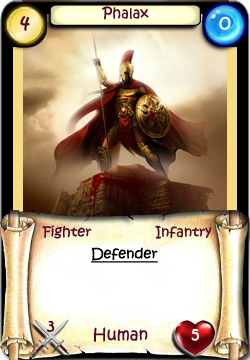
<style>
.page{position:relative;width:250px;height:360px}
.page>*{position:absolute;margin:0}
.t1{font:14px "KristenITC-Regular";color:#51092d}
.t2{font:20px "KristenITC-Regular";color:#51092d}
.t3{font:20px "KristenITC-Regular";color:#ffffff}
.t4{font:14px "KristenITC-Regular";color:#000000;text-decoration:underline}
.t5{font:16px "KristenITC-Regular";color:#51092d}
.t6{font:16px "KristenITC-Regular";color:#fefefe}
</style>
<div class="page">
<p class="t1" style="left:102px;top:6px;width:47px;height:14px">Phalax</p>
<p class="t2" style="left:20px;top:16px;width:10px;height:15px">4</p>
<p class="t3" style="left:219px;top:16px;width:12px;height:14px">0</p>
<p class="t1" style="left:42px;top:225px;width:50px;height:14px">Fighter</p>
<p class="t1" style="left:155px;top:225px;width:57px;height:14px">Infantry</p>
<p class="t4" style="left:91px;top:247px;width:67px;height:16px">Defender</p>
<p class="t5" style="left:47px;top:320px;width:8px;height:12px">3</p>
<p class="t5" style="left:93px;top:327px;width:55px;height:15px">Human</p>
<p class="t6" style="left:191px;top:328px;width:8px;height:13px">5</p>
</div>
